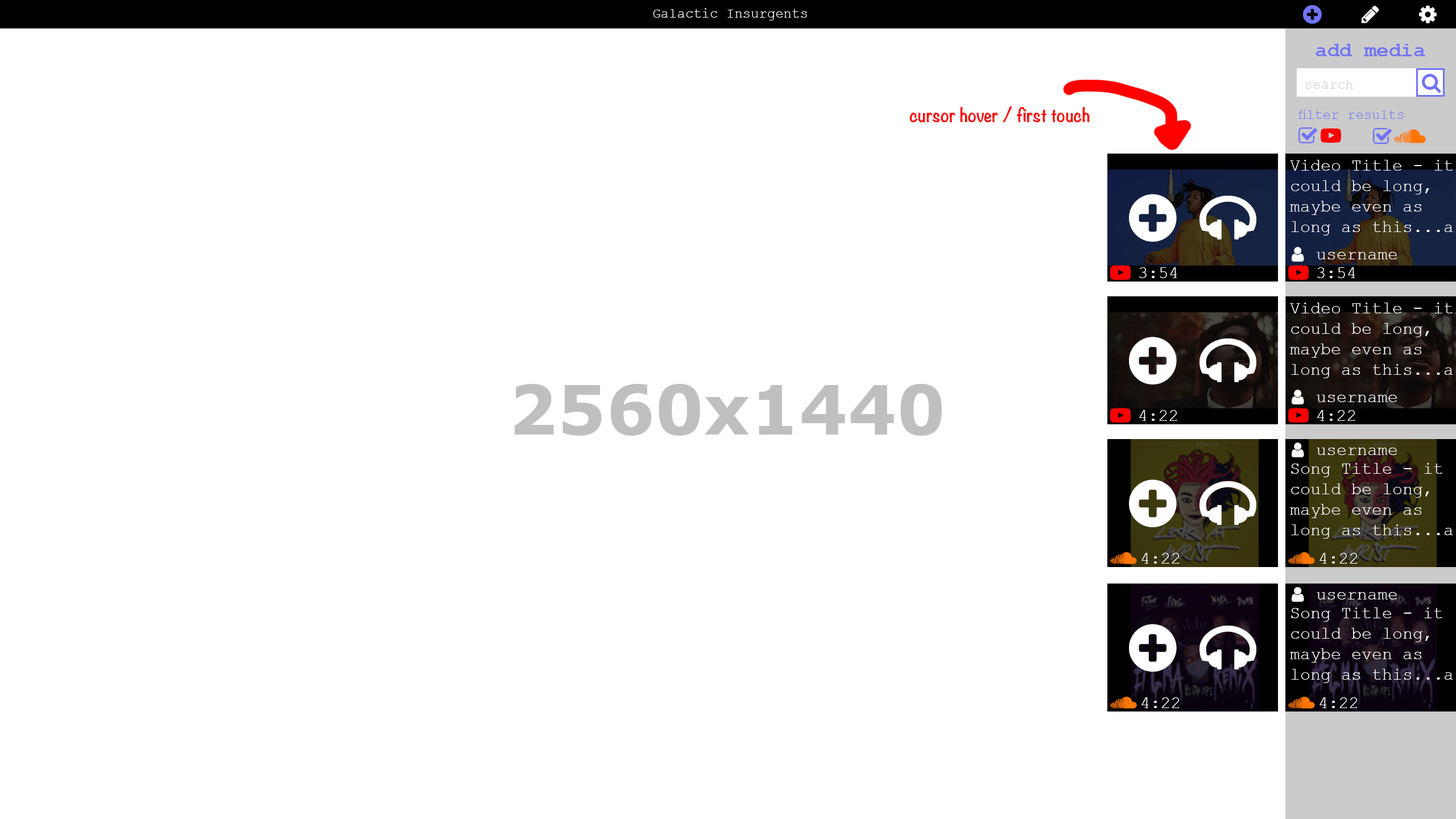
<style>
.page{position:relative;width:1456px;height:819px;background:#ffffff}
.page>*{position:absolute;margin:0}
.t1{font:13.6px "CourierNewPSMT";color:#ffffff}
.t2{font:20.5px "CourierNewPS-BoldMT";color:#7174f6}
.t3{font:13.6px "CourierNewPSMT";color:#cbcbcb}
.t4{font:17.1px "Noteworthy-Bold";color:#ff0000}
.t5{font:13.6px "CourierNewPSMT";color:#7174f6}
.t6{font:17.1px "CourierNewPSMT";color:#ffffff}
.t7{font:68.2px "Verdana-Bold";letter-spacing:0.005em;color:#c0bfbf}
</style>
<div class="page">
<p class="t1" style="left:653px;top:8px;width:154px;height:12px">Galactic Insurgents</p>
<p class="t2" style="left:1316px;top:44px;width:109px;height:12px">add media</p>
<p class="t3" style="left:1305px;top:80px;width:48px;height:9px">search</p>
<p class="t4" style="left:909px;top:106px;width:181px;height:16px">cursor hover / first touch</p>
<p class="t5" style="left:1298px;top:110px;width:106px;height:9px">filter results</p>
<p class="t6" style="left:1290px;top:160px;width:163px;height:75px;text-align:right">Video Title - it could be long, maybe even as long as this...a</p>
<p class="t6" style="left:1317px;top:252px;width:80px;height:7px">username</p>
<p class="t6" style="left:1139px;top:267px;width:38px;height:11px">3:54</p>
<p class="t6" style="left:1317px;top:267px;width:38px;height:11px">3:54</p>
<p class="t6" style="left:1290px;top:303px;width:163px;height:75px;text-align:right">Video Title - it could be long, maybe even as long as this...a</p>
<p class="t7" style="left:514px;top:384px;width:428px;height:52px">2560x1440</p>
<p class="t6" style="left:1317px;top:395px;width:80px;height:7px">username</p>
<p class="t6" style="left:1139px;top:410px;width:38px;height:11px">4:22</p>
<p class="t6" style="left:1317px;top:410px;width:38px;height:11px">4:22</p>
<p class="t6" style="left:1317px;top:448px;width:80px;height:7px">username</p>
<p class="t6" style="left:1290px;top:463px;width:163px;height:76px;text-align:right">Song Title - it could be long, maybe even as long as this...a</p>
<p class="t6" style="left:1141px;top:553px;width:38px;height:11px">4:22</p>
<p class="t6" style="left:1319px;top:553px;width:38px;height:11px">4:22</p>
<p class="t6" style="left:1317px;top:592px;width:80px;height:7px">username</p>
<p class="t6" style="left:1290px;top:607px;width:163px;height:76px;text-align:right">Song Title - it could be long, maybe even as long as this...a</p>
<p class="t6" style="left:1141px;top:697px;width:38px;height:11px">4:22</p>
<p class="t6" style="left:1319px;top:697px;width:38px;height:11px">4:22</p>
</div>
